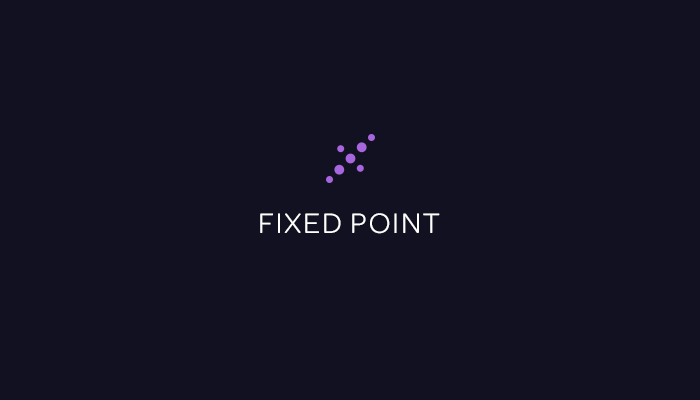
<style>
.page{position:relative;width:700px;height:400px;background:#111122}
.page>*{position:absolute;margin:0}
.t1{font:30px "Omnes-Regular";letter-spacing:0.05em;color:#ffffff;text-transform:uppercase}
</style>
<div class="page">
<p class="t1" style="left:260px;top:213px;width:180px;height:21px">FIXED POINT</p>
</div>
